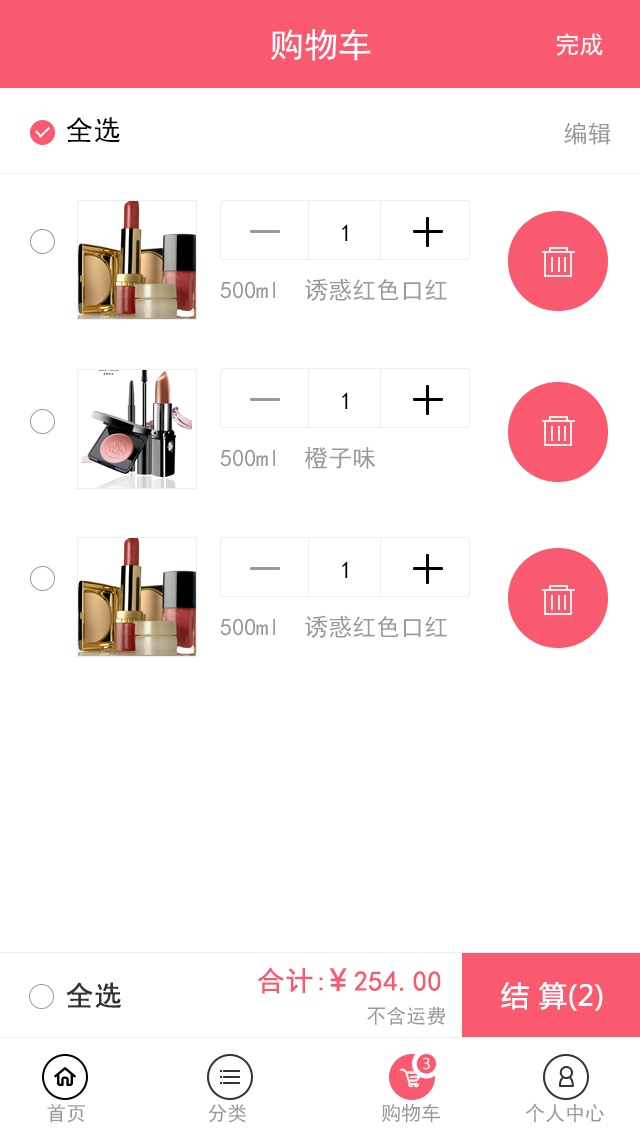
<style>
.page{position:relative;width:640px;height:1136px;background:#ffffff}
.page>*{position:absolute;margin:0}
.t1{font:34px "SimHei";color:#ffffff}
.t2{font:24px "SimHei";color:#ffffff}
.t3{font:28px "SimHei";color:#000000}
.t4{font:24px "SimHei";color:#999999}
.t5{font:24px "SimHei";color:#000000}
.t6{font:28px "SimHei";color:#f95a70;font-weight:bold}
.t7{font:30px "MicrosoftYaHei";color:#f95a70;font-weight:bold}
.t8{font:28px "SimHei";color:#333333;font-weight:bold}
.t9{font:28px "MicrosoftYaHei";color:#fffefe;font-weight:bold}
.t10{font:20px "SimHei";color:#999999}
.t11{font:16.8px "MyriadPro-Regular";color:#f8f8f8}
</style>
<div class="page">
<p class="t1" style="left:271px;top:29px;width:100px;height:32px">购物车</p>
<p class="t2" style="left:556px;top:33px;width:47px;height:23px">完成</p>
<p class="t3" style="left:66px;top:117px;width:54px;height:26px">全选</p>
<p class="t4" style="left:564px;top:122px;width:47px;height:23px">编辑</p>
<p class="t5" style="left:342px;top:224px;width:6px;height:17px">1</p>
<p class="t4" style="left:220px;top:278px;width:227px;height:23px">500ml  诱惑红色口红</p>
<p class="t5" style="left:342px;top:392px;width:6px;height:17px">1</p>
<p class="t4" style="left:220px;top:447px;width:156px;height:22px">500ml  橙子味</p>
<p class="t5" style="left:342px;top:561px;width:6px;height:17px">1</p>
<p class="t4" style="left:220px;top:615px;width:227px;height:23px">500ml  诱惑红色口红</p>
<p class="t6" style="left:257px;top:967px;width:66px;height:27px">合计:</p>
<p class="t6" style="left:329px;top:968px;width:112px;height:24px"><span class="t7">￥</span>254.00</p>
<p class="t8" style="left:66px;top:982px;width:56px;height:26px">全选</p>
<p class="t9" style="left:501px;top:982px;width:102px;height:29px">结 算(2)</p>
<p class="t10" style="left:367px;top:1006px;width:78px;height:19px">不含运费</p>
<p class="t11" style="left:423px;top:1057px;width:7px;height:13px">3</p>
<p class="t10" style="left:47px;top:1104px;width:38px;height:19px">首页</p>
<p class="t10" style="left:208px;top:1104px;width:38px;height:19px">分类</p>
<p class="t10" style="left:382px;top:1103px;width:58px;height:20px">购物车</p>
<p class="t10" style="left:525px;top:1103px;width:79px;height:20px">个人中心</p>
</div>
